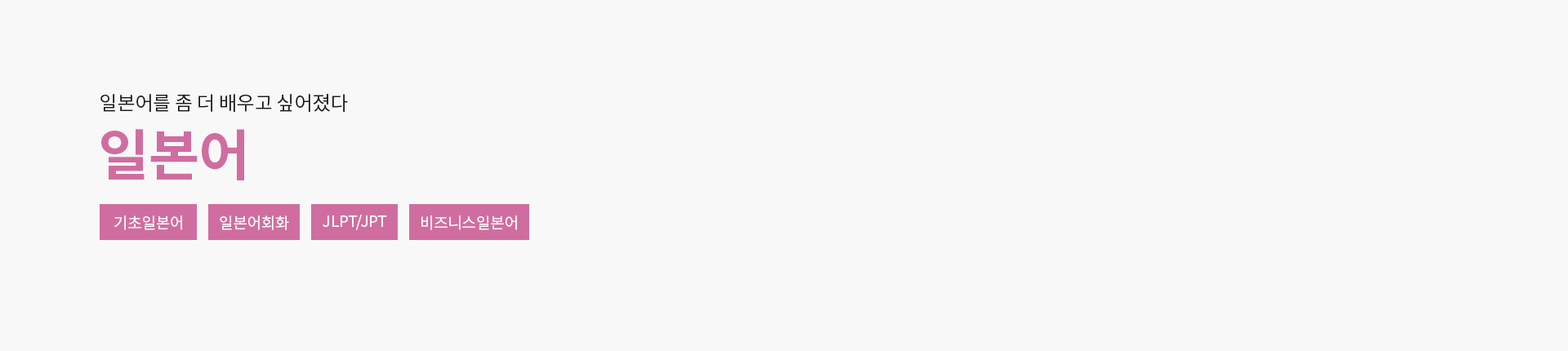
<style>
.page{position:relative;width:1568px;height:351px;background:#f8f8f8}
.page>*{position:absolute;margin:0}
.t1{font:19.6px "NotoSansCJKkr-Regular";letter-spacing:-0.01em;color:#181818}
.t2{font:55.5px "NotoSansCJKkr-Bold";letter-spacing:-0.01em;color:#d06da0}
.t3{font:15.5px "NotoSansCJKkr-Regular";letter-spacing:-0.01em;color:#fefefe}
</style>
<div class="page">
<p class="t1" style="left:100px;top:94px;width:248px;height:18px">일본어를 좀 더 배우고 싶어졌다</p>
<p class="t2" style="left:101px;top:129px;width:143px;height:51px">일본어</p>
<p class="t3" style="left:114px;top:216px;width:68px;height:14px">기초일본어</p>
<p class="t3" style="left:220px;top:216px;width:69px;height:14px">일본어회화</p>
<p class="t3" style="left:323px;top:215px;width:64px;height:15px">JLPT/JPT</p>
<p class="t3" style="left:421px;top:216px;width:96px;height:14px">비즈니스일본어</p>
</div>
